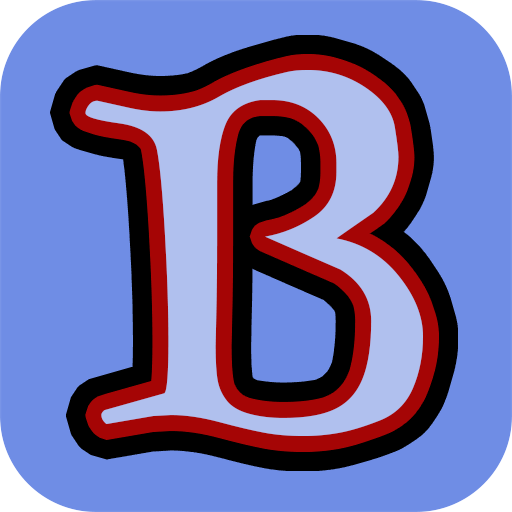
<style>
.page{position:relative;width:512px;height:512px;background:#6f8de5}
.page>*{position:absolute;margin:0}
.t1{font:512px "GoudyMedieval";color:#b0c0ee}
</style>
<div class="page">
<p class="t1" style="left:85px;top:70px;width:338px;height:366px">B</p>
</div>
